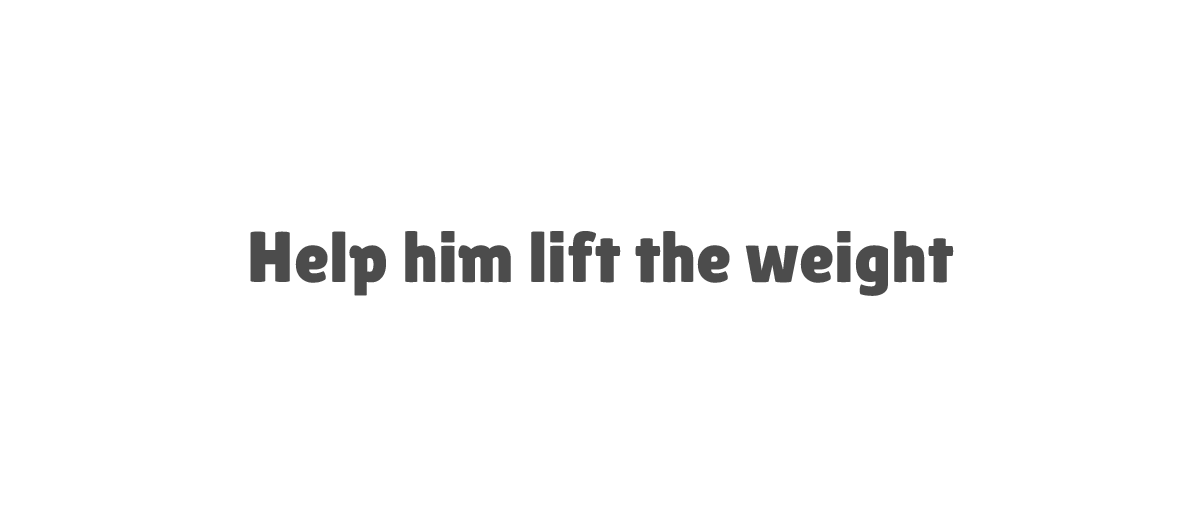
<style>
.page{position:relative;width:1200px;height:512px;background:#ffffff}
.page>*{position:absolute;margin:0}
.t1{font:72px "LilitaOne";color:#4c4c4c}
</style>
<div class="page">
<p class="t1" style="left:250px;top:231px;width:704px;height:65px">Help him lift the weight</p>
</div>
